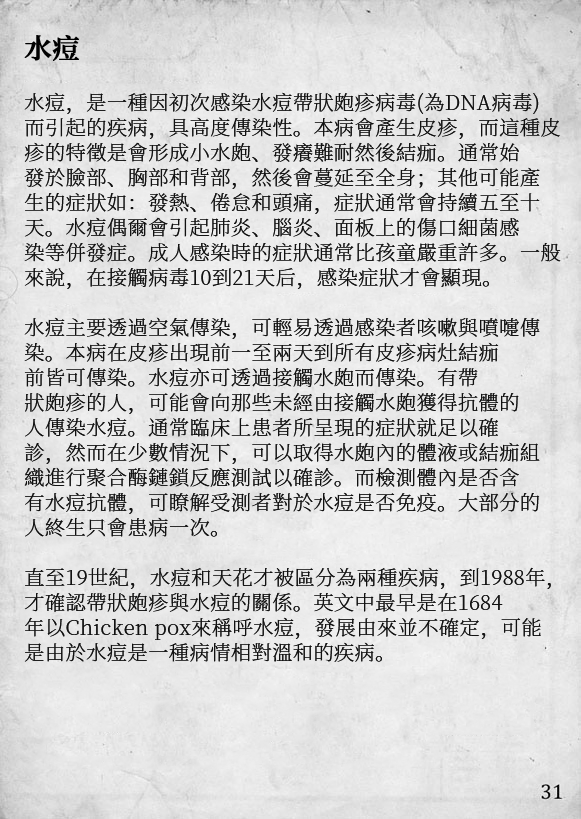
<style>
.page{position:relative;width:581px;height:819px}
.page>*{position:absolute;margin:0}
.t1{font:20.2px/25px "SourceHanSerifCN-ExtraLight";letter-spacing:0.02em;color:#111111}
.t2{font:27.2px/29px "SourceHanSerifCN-SemiBold";letter-spacing:0.02em;color:#000000;font-weight:bold}
</style>
<div class="page">
<p class="t1" style="left:24px;top:35px;width:537px;height:627px"><span class="t2">水痘<br><br></span>水痘，是一種因初次感染水痘帶狀皰疹病毒(為DNA病毒)<br>而引起的疾病，具高度傳染性。本病會產生皮疹，而這種皮<br>疹的特徵是會形成小水皰、發癢難耐然後結痂。通常始<br>發於臉部、胸部和背部，然後會蔓延至全身；其他可能產<br>生的症狀如：發熱、倦怠和頭痛，症狀通常會持續五至十<br>天。水痘偶爾會引起肺炎、腦炎、面板上的傷口細菌感<br>染等併發症。成人感染時的症狀通常比孩童嚴重許多。一般<br>來說，在接觸病毒10到21天后，感染症狀才會顯現。<br><br>水痘主要透過空氣傳染，可輕易透過感染者咳嗽與噴嚏傳<br>染。本病在皮疹出現前一至兩天到所有皮疹病灶結痂<br>前皆可傳染。水痘亦可透過接觸水皰而傳染。有帶<br>狀皰疹的人，可能會向那些未經由接觸水皰獲得抗體的<br>人傳染水痘。通常臨床上患者所呈現的症狀就足以確<br>診，然而在少數情況下，可以取得水皰內的體液或結痂組<br>織進行聚合酶鏈鎖反應測試以確診。而檢測體內是否含<br>有水痘抗體，可瞭解受測者對於水痘是否免疫。大部分的<br>人終生只會患病一次。<br><br>直至19世紀，水痘和天花才被區分為兩種疾病，到1988年，<br>才確認帶狀皰疹與水痘的關係。英文中最早是在1684<br>年以Chicken pox來稱呼水痘，發展由來並不確定，可能<br>是由於水痘是一種病情相對溫和的疾病。</p>
</div>
